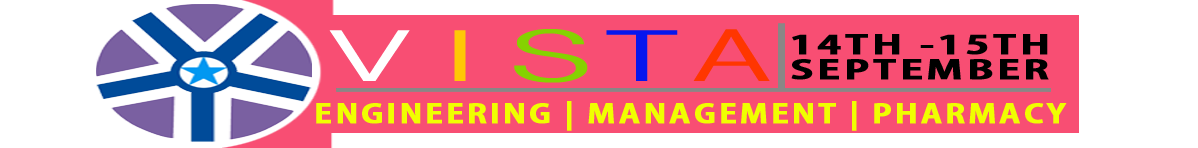
<style>
.page{position:relative;width:1198px;height:148px;background:#f84e73}
.page>*{position:absolute;margin:0}
.t1{font:70.7px "DotumChe";letter-spacing:0.1em;color:#ffffff;text-transform:uppercase;scale:2.35 1}
.t2{font:70.7px "DotumChe";letter-spacing:0.1em;color:#ffc706;text-transform:uppercase;scale:2.35 1}
.t3{font:70.7px "DotumChe";letter-spacing:0.1em;color:#85d200;text-transform:uppercase;scale:2.35 1}
.t4{font:70.7px "DotumChe";letter-spacing:0.1em;color:#0616ee;text-transform:uppercase;scale:2.35 1}
.t5{font:70.7px "DotumChe";letter-spacing:0.1em;color:#ff3600;text-transform:uppercase;scale:2.35 1}
.t6{font:25.7px "AdobeGothicStd-Bold";letter-spacing:0.1em;color:#000000;text-transform:uppercase;font-weight:bold;scale:1.6 1}
.t7{font:25.7px "AdobeGothicStd-Bold";letter-spacing:0.1em;color:#f0ff00;text-transform:uppercase;font-weight:bold;scale:1.24 1}
</style>
<div class="page">
<p class="t1" style="left:329px;top:29px;width:441px;height:54px">v<span class="t2">i</span><span class="t3">s</span><span class="t4">t</span><span class="t5">a</span></p>
<p class="t6" style="left:791px;top:34px;width:258px;height:46px;text-align:center">14TH -15TH SEPTEMBER</p>
<p class="t7" style="left:316px;top:101px;width:751px;height:30px">engineering | management | pharmacy</p>
</div>
